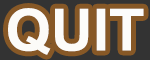
<style>
.page{position:relative;width:150px;height:60px;background:#875826}
.page>*{position:absolute;margin:0}
.t1{font:58px "Arial-BoldMT";color:#ffffff}
</style>
<div class="page">
<p class="t1" style="left:8px;top:8px;width:136px;height:47px">QUIT</p>
</div>
